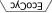
<style>
.page{position:relative;width:52px;height:13px;background:#fefefe}
.page>*{position:absolute;margin:0}
.t1{font:10px "Tahoma";letter-spacing:0.025em;color:#000000}
</style>
<div class="page">
<p class="t1" style="left:10px;top:0px;width:33px;height:11px;rotate:180deg">EcoCyc</p>
</div>
